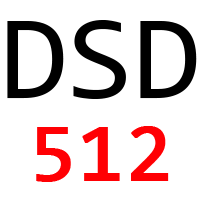
<style>
.page{position:relative;width:200px;height:200px;background:#ffffff}
.page>*{position:absolute;margin:0}
.t1{font:120.8px "Consolas";color:#000000}
.t2{font:83.3px "Consolas";color:#ff0004;font-weight:bold}
</style>
<div class="page">
<p class="t1" style="left:7px;top:20px;width:190px;height:79px">DSD</p>
<p class="t2" style="left:36px;top:126px;width:133px;height:56px">512</p>
</div>
